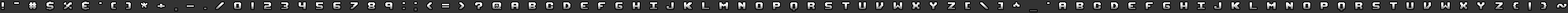
<style>
.page{position:relative;width:1568px;height:13px;background:#333333}
.page>*{position:absolute;margin:0}
.t1{font:13.1px "UpheavalTT-BRK-"}
</style>
<div class="page">
<p class="t1" style="left:2px;top:2px;width:1564px;height:10px">!  "  #  $  %  &amp;  '  (  )  *  +  ,  -  .  /  0  1  2  3  4  5  6  7  8  9  :  ;  &lt;  =  &gt;  ?  @  A  B  C  D  E  F  G  H  I  J  K  L  M  N  O  P  Q  R  S  T  U  V  W  X  Y  Z  [  \  ]  ^  _  `  a  b  c  d  e  f  g  h  i  j  k  l  m  n  o  p  q  r  s  t  u  v  w  x  y  z  {  |  }  ~</p>
</div>
